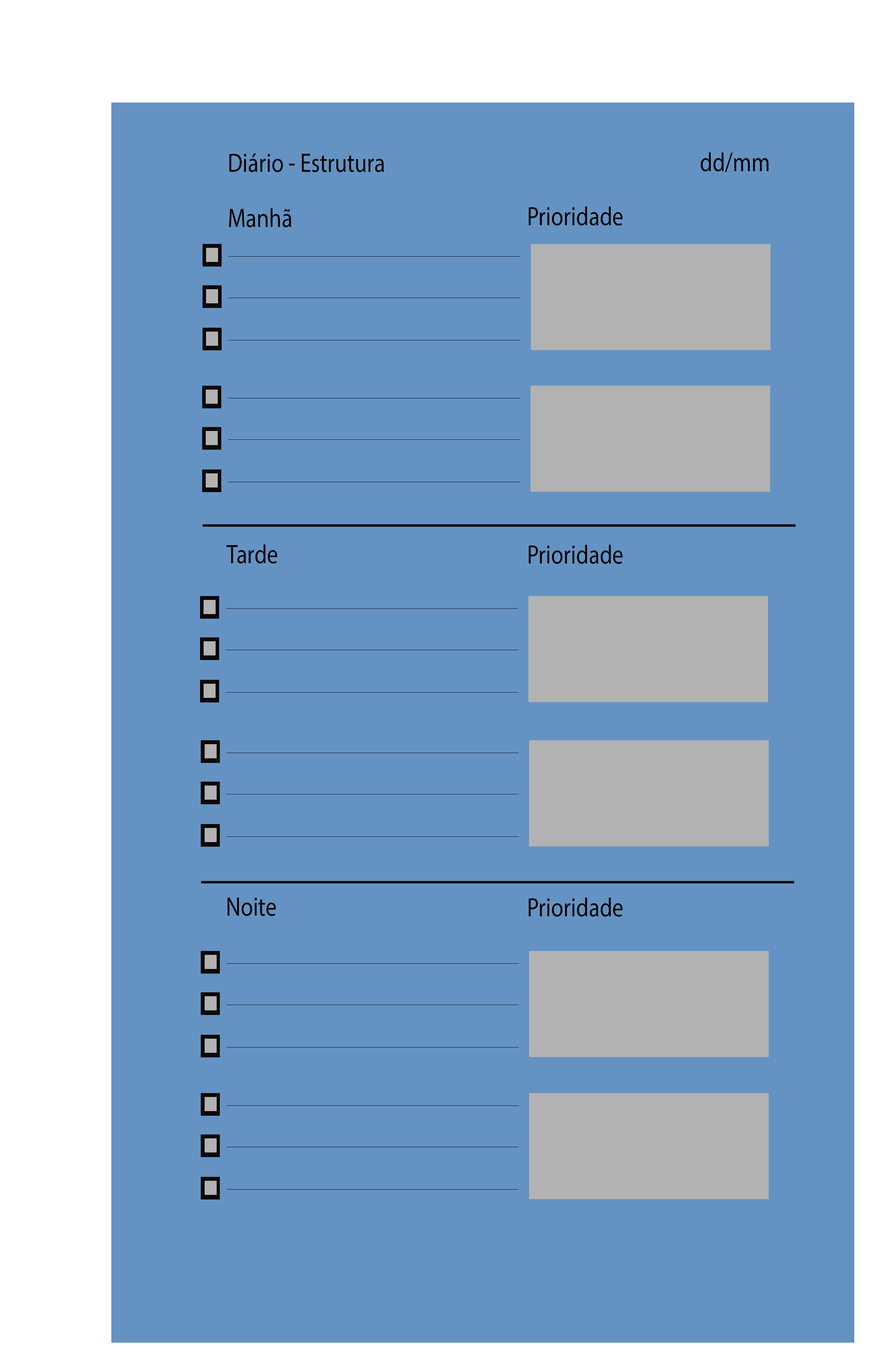
<style>
.page{position:relative;width:873px;height:1366px;background:#6493c3}
.page>*{position:absolute;margin:0}
.t1{font:26.5px "MyriadPro-Regular";color:#000000;scale:0.85 1}
</style>
<div class="page">
<p class="t1" style="left:229px;top:153px;width:155px;height:19px">Diário - Estrutura</p>
<p class="t1" style="left:701px;top:152px;width:68px;height:20px">dd/mm</p>
<p class="t1" style="left:229px;top:208px;width:62px;height:19px">Manhã</p>
<p class="t1" style="left:529px;top:206px;width:94px;height:20px">Prioridade</p>
<p class="t1" style="left:227px;top:544px;width:50px;height:19px">Tarde</p>
<p class="t1" style="left:529px;top:545px;width:94px;height:19px">Prioridade</p>
<p class="t1" style="left:227px;top:897px;width:49px;height:19px">Noite</p>
<p class="t1" style="left:529px;top:897px;width:94px;height:20px">Prioridade</p>
</div>
